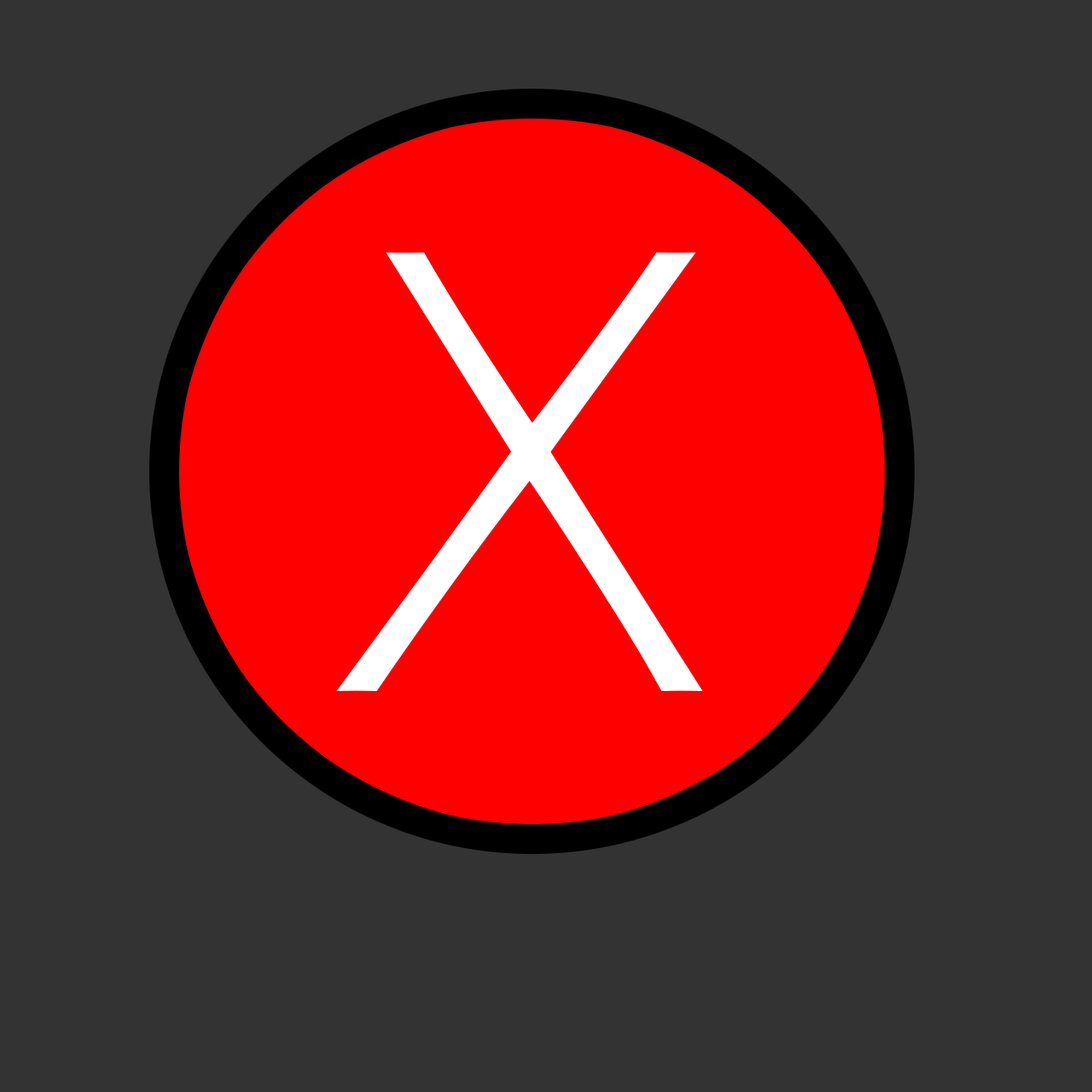
<style>
.page{position:relative;width:1092px;height:1092px;background:#333333}
.page>*{position:absolute;margin:0}
.t1{font:888.7px "ErasITC-Light";color:#ffffff}
</style>
<div class="page">
<p class="t1" style="left:336px;top:253px;width:367px;height:438px">x</p>
</div>
